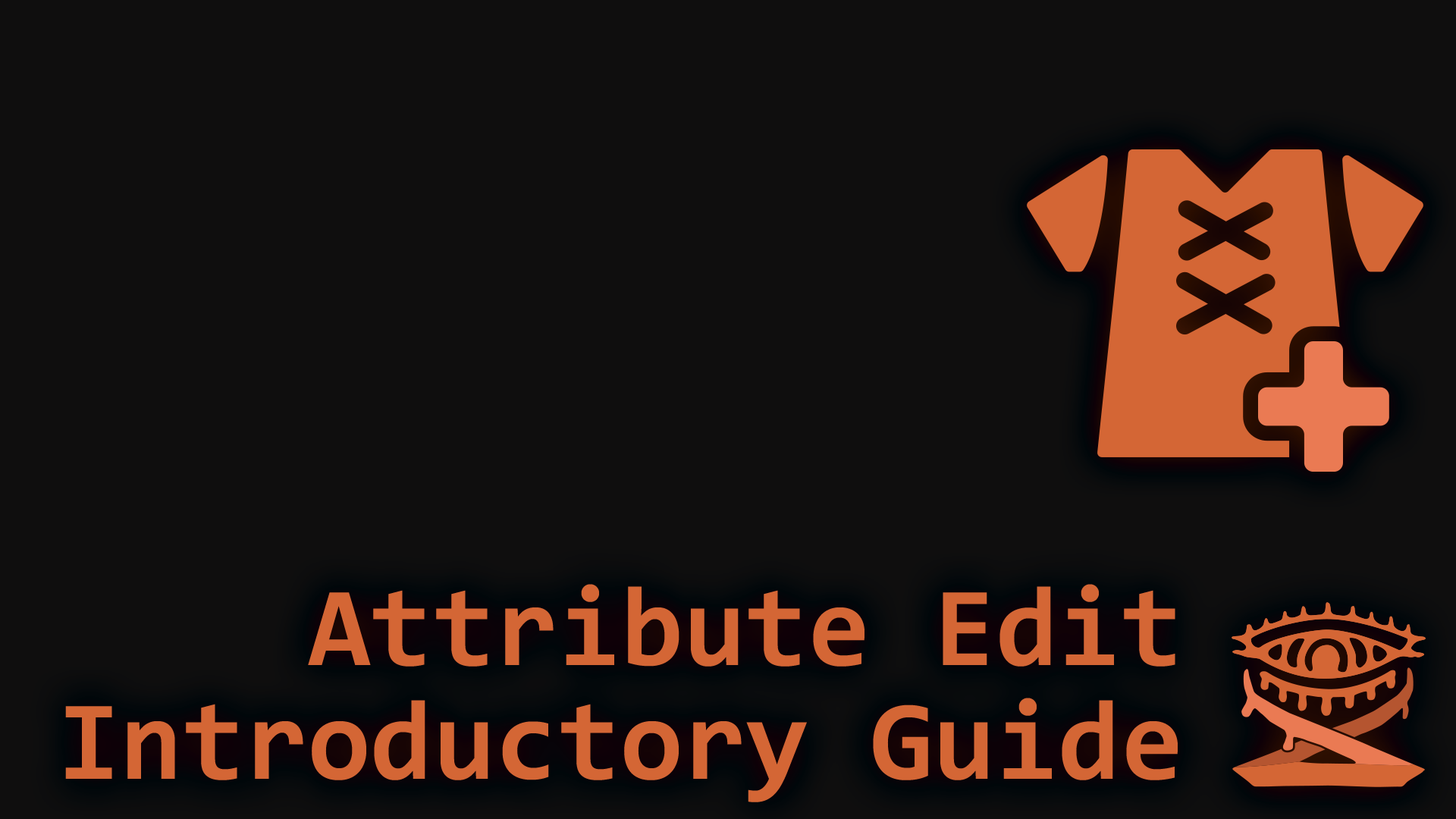
<style>
.page{position:relative;width:1456px;height:819px;background:#0f0e0e}
.page>*{position:absolute;margin:0}
.t1{font:113.7px/113.7px "Consolas-Bold";color:#d46635}
</style>
<div class="page">
<p class="t1" style="left:65px;top:584px;width:1113px;height:218px;text-align:right">Attribute Edit<br>Introductory Guide</p>
</div>
